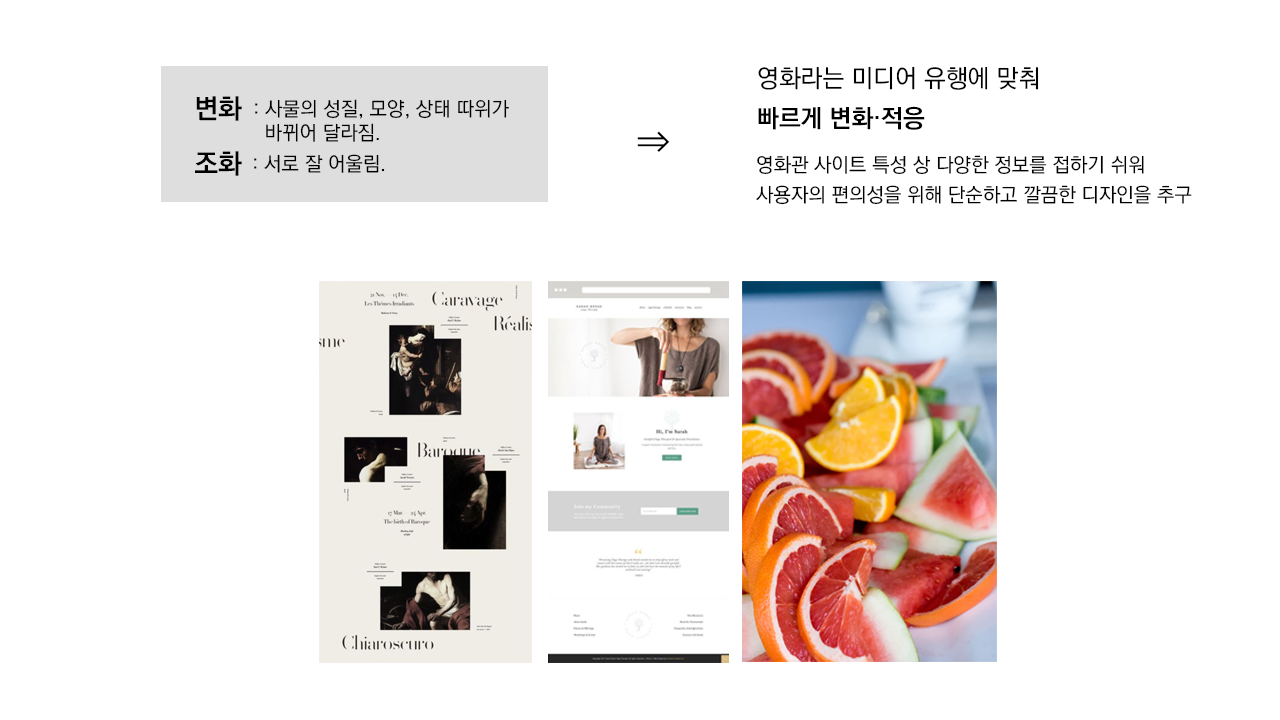
<style>
.page{position:relative;width:1280px;height:720px;background:#ffffff}
.page>*{position:absolute;margin:0}
.t1{font:25px/40px "KoPubWorldDotumMedium";color:#000000}
.t2{font:25px/40px "KoPubWorldDotumBold";color:#000000}
.t3{font:27.2px/55px "KoPubWorldDotumBold";color:#000000}
.t4{font:27.2px/40px "KoPubWorldDotumBold";color:#000000}
.t5{font:20px "KoPubWorldDotumMedium";color:#000000}
.t6{font:37.5px "KoPubWorldDotumLight";color:#000000}
.t7{font:20px/30px "KoPubWorldDotumMedium";color:#000000}
</style>
<div class="page">
<p class="t1" style="left:758px;top:66px;width:281px;height:64px">영화라는 미디어 유행에 맞춰<br><span class="t2">빠르게 변화·적응</span></p>
<p class="t3" style="left:195px;top:96px;width:47px;height:80px"><span class="t4">변</span>화<br>조화</p>
<p class="t5" style="left:255px;top:99px;width:254px;height:43px">: 사물의 성질, 모양, 상태 따위가<br>  바뀌어 달라짐.</p>
<p class="t6" style="left:637px;top:131px;width:33px;height:21px">⇒</p>
<p class="t5" style="left:254px;top:154px;width:131px;height:19px">: 서로 잘 어울림.</p>
<p class="t7" style="left:756px;top:155px;width:436px;height:50px">영화관 사이트 특성 상 다양한 정보를 접하기 쉬워<br>사용자의 편의성을 위해 단순하고 깔끔한 디자인을 추구</p>
</div>
